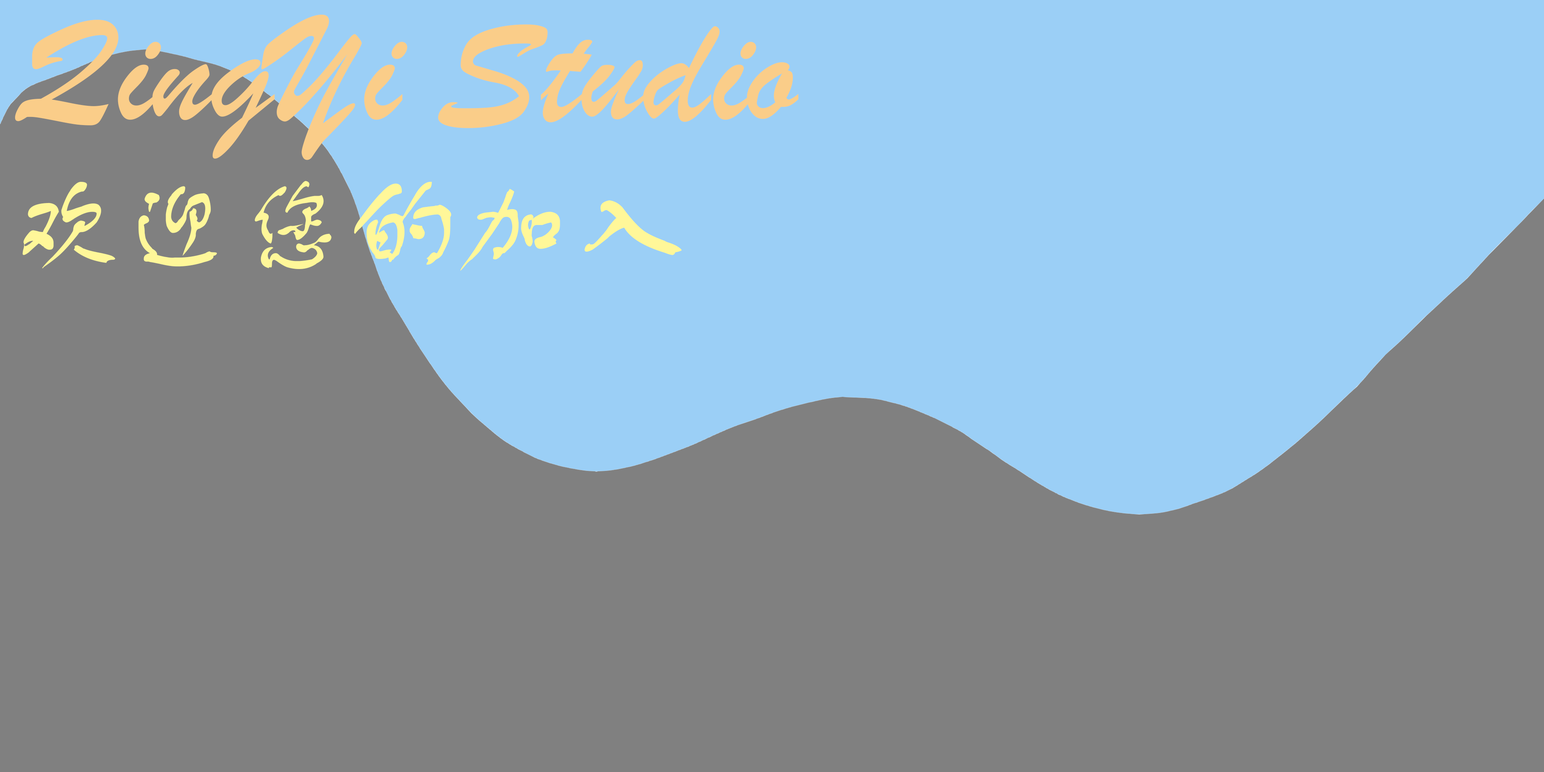
<style>
.page{position:relative;width:1544px;height:772px;background:#808080}
.page>*{position:absolute;margin:0}
.t1{font:160.9px "STXingkai";color:#facd89}
.t2{font:112.6px "FZSTK--GBK1-0";color:#fff799}
</style>
<div class="page">
<p class="t1" style="left:15px;top:15px;width:784px;height:145px">QingYi Studio</p>
<p class="t2" style="left:22px;top:181px;width:660px;height:90px">欢迎您的加入</p>
</div>
